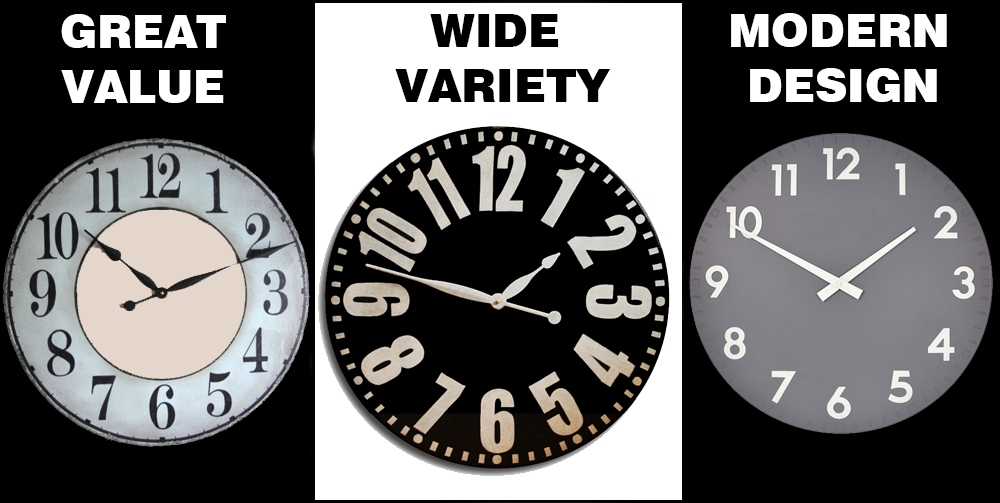
<style>
.page{position:relative;width:1000px;height:503px;background:#000000}
.page>*{position:absolute;margin:0}
.t1{font:45.8px "Swiss721BT-Black";color:#ffffff}
.t2{font:45.8px "Swiss721BT-Black";color:#000000}
.t3{font:45.8px "Swiss721BT-Black";color:#e4d6cb}
</style>
<div class="page">
<p class="t1" style="left:61px;top:14px;width:165px;height:89px;text-align:center">GREAT<br>VALUE</p>
<p class="t2" style="left:395px;top:14px;width:216px;height:88px;text-align:center">WIDE <br>VARIETY</p>
<p class="t1" style="left:731px;top:13px;width:216px;height:89px;text-align:center"><span class="t3"> </span>MODERN <br>  DESIGN</p>
</div>
